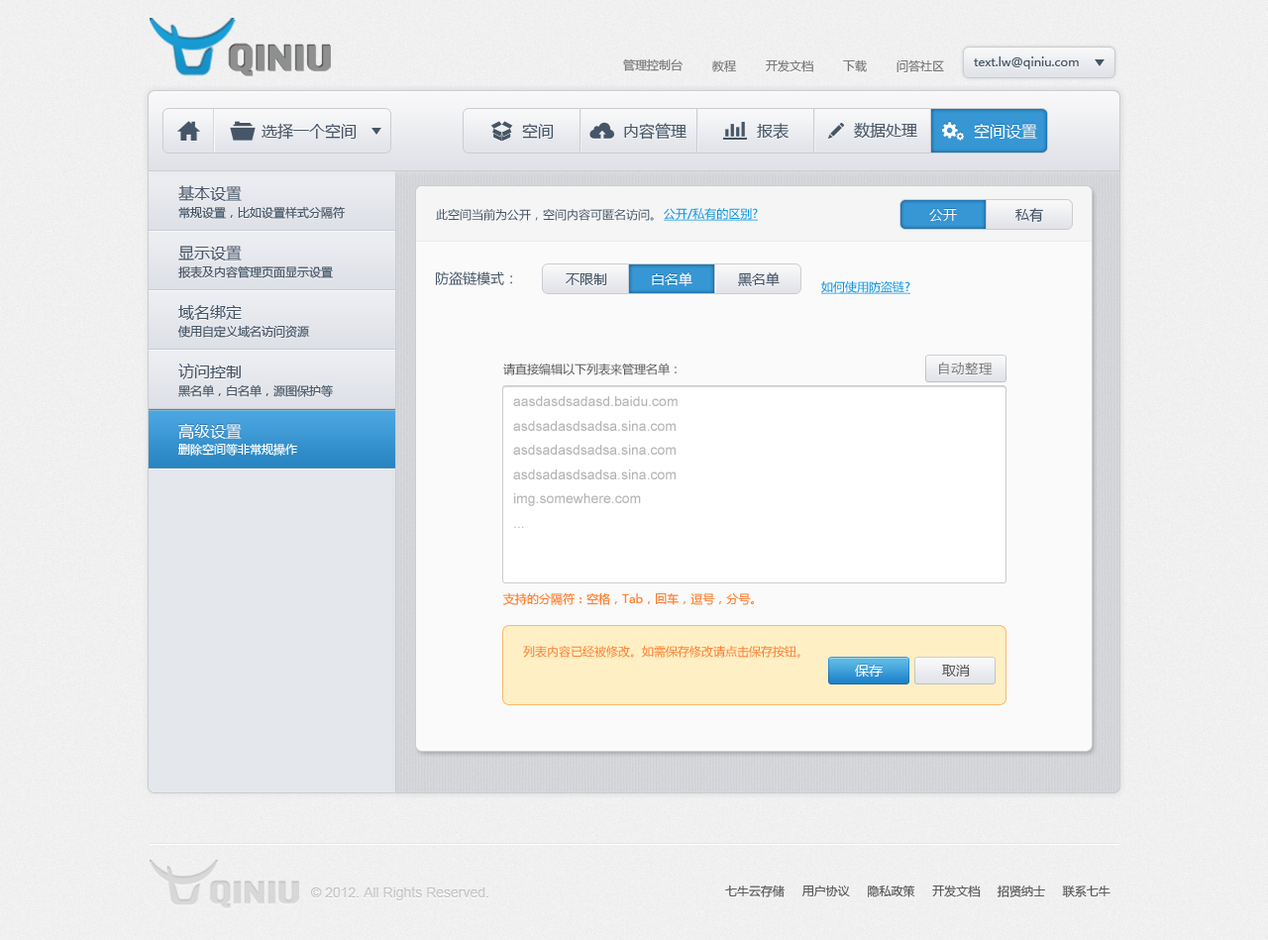
<style>
.page{position:relative;width:1268px;height:940px}
.page>*{position:absolute;margin:0}
.t1{font:11.9px "MicrosoftYaHei";color:#787878}
.t2{font:11.9px "MicrosoftYaHei";color:#465567}
.t3{font:15.9px "MicrosoftYaHei";color:#465567}
.t4{font:15.9px "MicrosoftYaHei";color:#ffffff}
.t5{font:11.9px "MicrosoftYaHei";color:#0c94de;text-decoration:underline}
.t6{font:13.9px "MicrosoftYaHei";color:#ffffff}
.t7{font:13.9px "MicrosoftYaHei";color:#465567}
.t8{font:11.9px "MicrosoftYaHei";color:#585858}
.t9{font:13.9px "SimHei";color:#787878}
.t10{font:13.9px "ArialMT";color:#b4b4b4}
.t11{font:11.9px "MicrosoftYaHei";color:#ffffff}
.t12{font:11.9px "MicrosoftYaHei";color:#ff7e30}
.t13{font:13.9px "MicrosoftYaHei";color:#585858}
.t14{font:13.9px "ArialMT";color:#c6c6c6}
</style>
<div class="page">
<p class="t1" style="left:623px;top:58px;width:60px;height:13px">管理控制台</p>
<p class="t1" style="left:712px;top:60px;width:25px;height:12px">教程</p>
<p class="t1" style="left:766px;top:59px;width:47px;height:13px">开发文档</p>
<p class="t1" style="left:843px;top:59px;width:24px;height:13px">下载</p>
<p class="t1" style="left:897px;top:59px;width:47px;height:13px">问答社区</p>
<p class="t2" style="left:974px;top:56px;width:105px;height:13px">text.lw@qiniu.com</p>
<p class="t3" style="left:262px;top:123px;width:95px;height:17px">选择一个空间</p>
<p class="t3" style="left:522px;top:123px;width:32px;height:16px">空间</p>
<p class="t3" style="left:624px;top:123px;width:63px;height:17px">内容管理</p>
<p class="t3" style="left:757px;top:123px;width:32px;height:17px">报表</p>
<p class="t3" style="left:854px;top:122px;width:63px;height:17px">数据处理</p>
<p class="t4" style="left:974px;top:123px;width:63px;height:16px">空间设置</p>
<p class="t3" style="left:178px;top:185px;width:64px;height:16px">基本设置</p>
<p class="t2" style="left:178px;top:206px;width:167px;height:13px">常规设置，比如设置样式分隔符</p>
<p class="t2" style="left:436px;top:209px;width:218px;height:12px">此空间当前为公开，空间内容可匿名访问。</p>
<p class="t5" style="left:664px;top:208px;width:94px;height:13px">公开/私有的区别?</p>
<p class="t6" style="left:929px;top:209px;width:28px;height:12px">公开</p>
<p class="t7" style="left:1016px;top:208px;width:27px;height:15px">私有</p>
<p class="t3" style="left:178px;top:246px;width:64px;height:15px">显示设置</p>
<p class="t2" style="left:178px;top:266px;width:155px;height:12px">报表及内容管理页面显示设置</p>
<p class="t7" style="left:436px;top:271px;width:76px;height:14px">防盗链模式：</p>
<p class="t7" style="left:566px;top:273px;width:41px;height:12px">不限制</p>
<p class="t6" style="left:652px;top:272px;width:41px;height:14px">白名单</p>
<p class="t7" style="left:738px;top:272px;width:42px;height:14px">黑名单</p>
<p class="t5" style="left:821px;top:281px;width:90px;height:13px">如何使用防盗链?</p>
<p class="t3" style="left:178px;top:305px;width:64px;height:15px">域名绑定</p>
<p class="t2" style="left:177px;top:325px;width:132px;height:13px">使用自定义域名访问资源</p>
<p class="t3" style="left:178px;top:364px;width:63px;height:15px">访问控制</p>
<p class="t8" style="left:503px;top:363px;width:174px;height:13px">请直接编辑以下列表来管理名单：</p>
<p class="t9" style="left:939px;top:362px;width:54px;height:14px">自动整理</p>
<p class="t2" style="left:178px;top:384px;width:155px;height:13px">黑名单，白名单，源图保护等</p>
<p class="t10" style="left:513px;top:396px;width:165px;height:132px">aasdasdsadasd.baidu.com<br>asdsadasdsadsa.sina.com<br>asdsadasdsadsa.sina.com<br>asdsadasdsadsa.sina.com<br>img.somewhere.com<br>...</p>
<p class="t4" style="left:178px;top:423px;width:64px;height:16px">高级设置</p>
<p class="t11" style="left:178px;top:443px;width:119px;height:13px">删除空间等非常规操作</p>
<p class="t12" style="left:502px;top:592px;width:252px;height:13px">支持的分隔符：空格，Tab，回车，逗号，分号。</p>
<p class="t12" style="left:523px;top:646px;width:278px;height:12px">列表内容已经被修改。如需保存修改请点击保存按钮。</p>
<p class="t6" style="left:855px;top:665px;width:28px;height:12px">保存</p>
<p class="t13" style="left:942px;top:665px;width:28px;height:12px">取消</p>
<p class="t14" style="left:310px;top:887px;width:178px;height:14px">© 2012. All Rights Reserved.</p>
<p class="t8" style="left:725px;top:885px;width:386px;height:13px">七牛云存储     用户协议     隐私政策     开发文档     招贤纳士     联系七牛</p>
</div>
